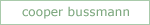
<style>
.page{position:relative;width:150px;height:25px;background:#ffffff}
.page>*{position:absolute;margin:0}
.t1{font:12px "Verdana";letter-spacing:0.01em;color:#7fa980}
</style>
<div class="page">
<p class="t1" style="left:22px;top:6px;width:107px;height:13px">cooper bussmann</p>
</div>
